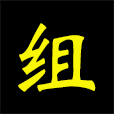
<style>
.page{position:relative;width:114px;height:114px;background:#000000}
.page>*{position:absolute;margin:0}
.t1{font:94px "Weibei-SC-Bold";color:#f9f607}
</style>
<div class="page">
<p class="t1" style="left:18px;top:23px;width:78px;height:69px">组</p>
</div>
